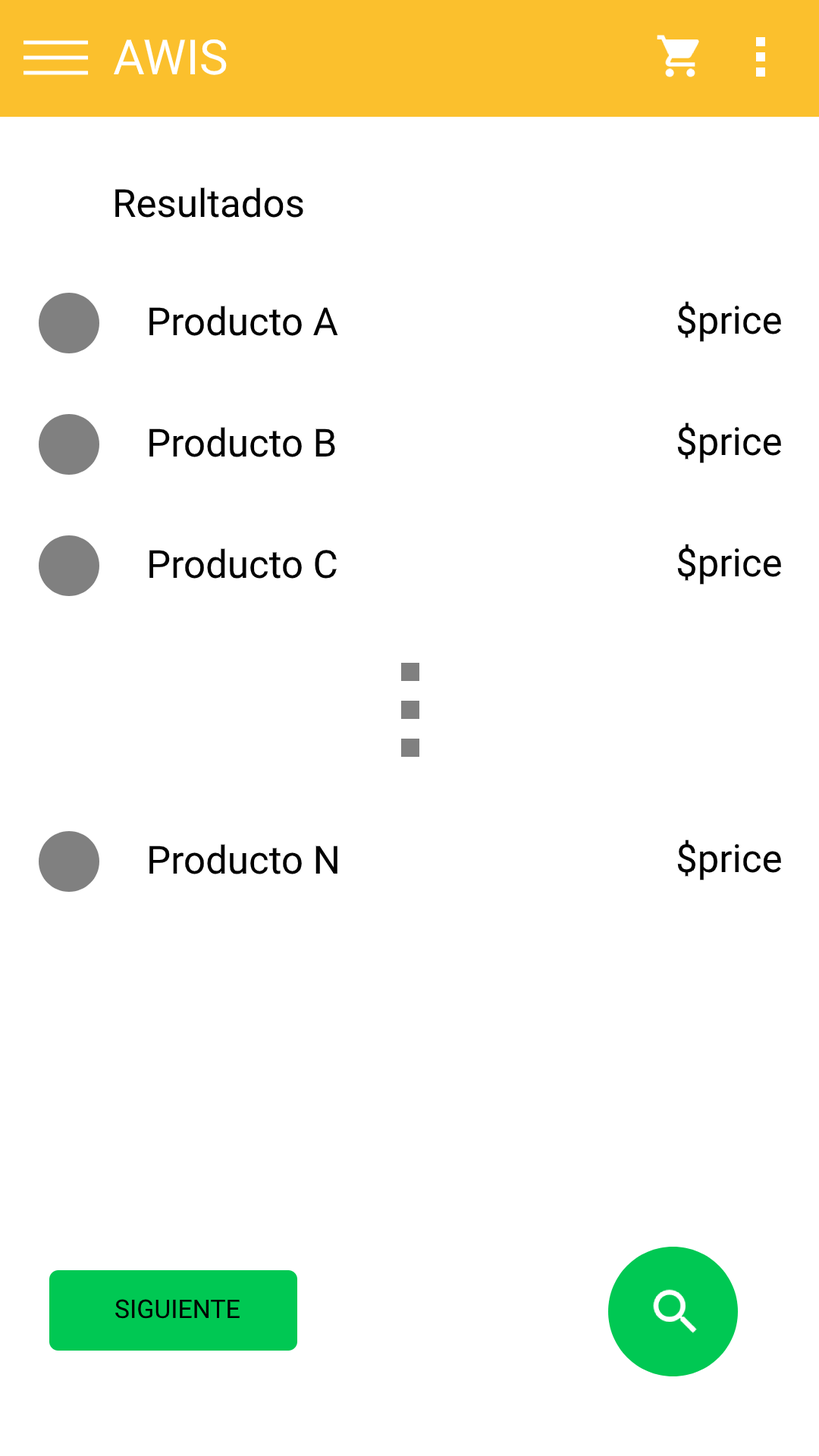
<style>
.page{position:relative;width:819px;height:1456px;background:#ffffff}
.page>*{position:absolute;margin:0}
.t1{font:48.5px "Roboto-Regular";color:#ffffff}
.t2{font:38.7px "Roboto-Regular";color:#000000}
</style>
<div class="page">
<p class="t1" style="left:113px;top:39px;width:114px;height:36px">AWIS</p>
<p class="t2" style="left:115px;top:187px;width:188px;height:31px">Resultados</p>
<p class="t2" style="left:149px;top:306px;width:189px;height:30px">Producto A</p>
<p class="t2" style="left:677px;top:301px;width:104px;height:41px">$price</p>
<p class="t2" style="left:677px;top:422px;width:104px;height:41px">$price</p>
<p class="t2" style="left:149px;top:427px;width:186px;height:30px">Producto B</p>
<p class="t2" style="left:677px;top:544px;width:104px;height:41px">$price</p>
<p class="t2" style="left:149px;top:548px;width:188px;height:31px">Producto C</p>
<p class="t2" style="left:149px;top:844px;width:188px;height:30px">Producto N</p>
<p class="t2" style="left:677px;top:839px;width:104px;height:41px">$price</p>
</div>
